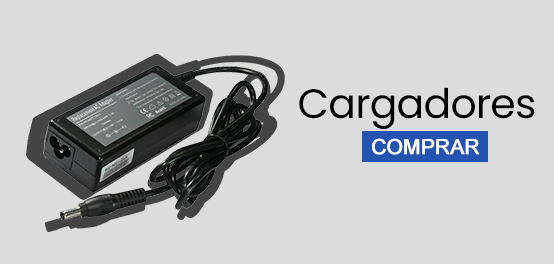
<style>
.page{position:relative;width:554px;height:264px;background:#dcdcdc}
.page>*{position:absolute;margin:0}
.t1{font:41px "Poppins-Regular";letter-spacing:-0.02em;color:#000000}
.t2{font:21px "ArialMT";letter-spacing:-0.02em;color:#ffffff;text-transform:uppercase;font-weight:bold}
</style>
<div class="page">
<p class="t1" style="left:299px;top:87px;width:236px;height:42px">Cargadores</p>
<p class="t2" style="left:372px;top:138px;width:108px;height:17px">comprar</p>
</div>
